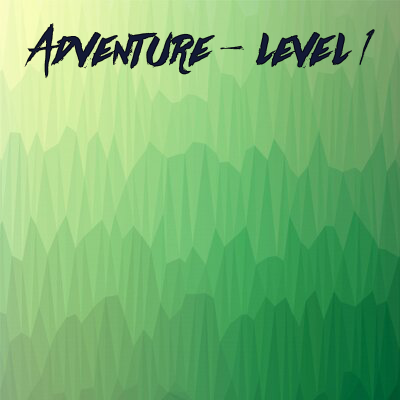
<style>
.page{position:relative;width:400px;height:400px}
.page>*{position:absolute;margin:0}
.t1{font:55px "Againts";color:#060b23}
.t2{font:55px "Againts";color:#131936}
</style>
<div class="page">
<p class="t1" style="left:24px;top:23px;width:351px;height:56px">Adventure - level 1</p>
<p class="t2" style="left:24px;top:23px;width:351px;height:56px">Adventure - level 1</p>
</div>
